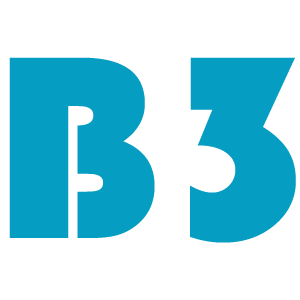
<style>
.page{position:relative;width:300px;height:300px;background:#ffffff}
.page>*{position:absolute;margin:0}
.t1{font:270.6px "Bauhaus93";color:#059dc1;scale:1.09 1}
</style>
<div class="page">
<p class="t1" style="left:9px;top:57px;width:287px;height:186px">B3</p>
</div>
